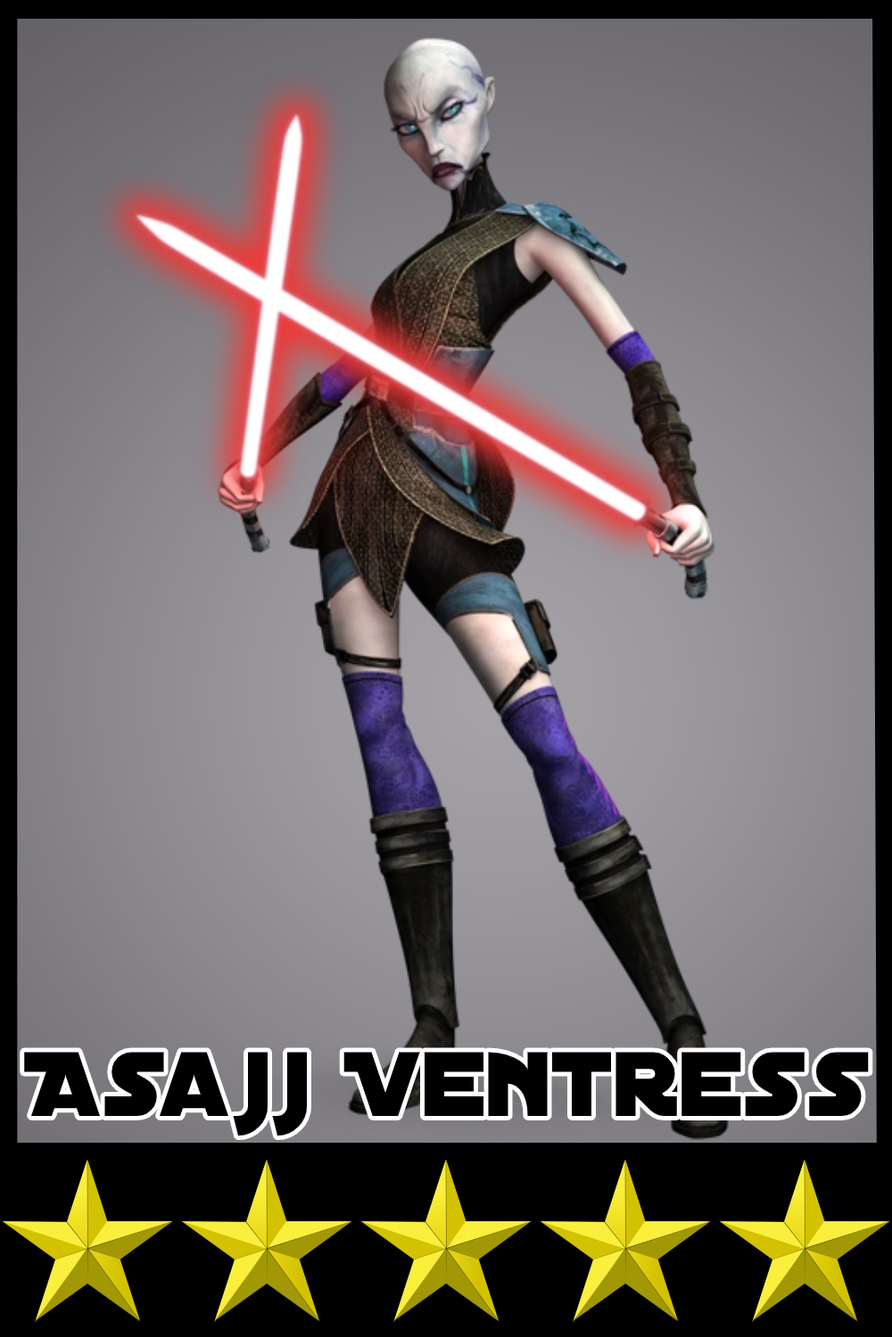
<style>
.page{position:relative;width:892px;height:1337px}
.page>*{position:absolute;margin:0}
.t1{font:98.1px "DistantGalaxy";color:#000000}
</style>
<div class="page">
<p class="t1" style="left:24px;top:1052px;width:844px;height:84px">Asajj Ventress</p>
</div>
